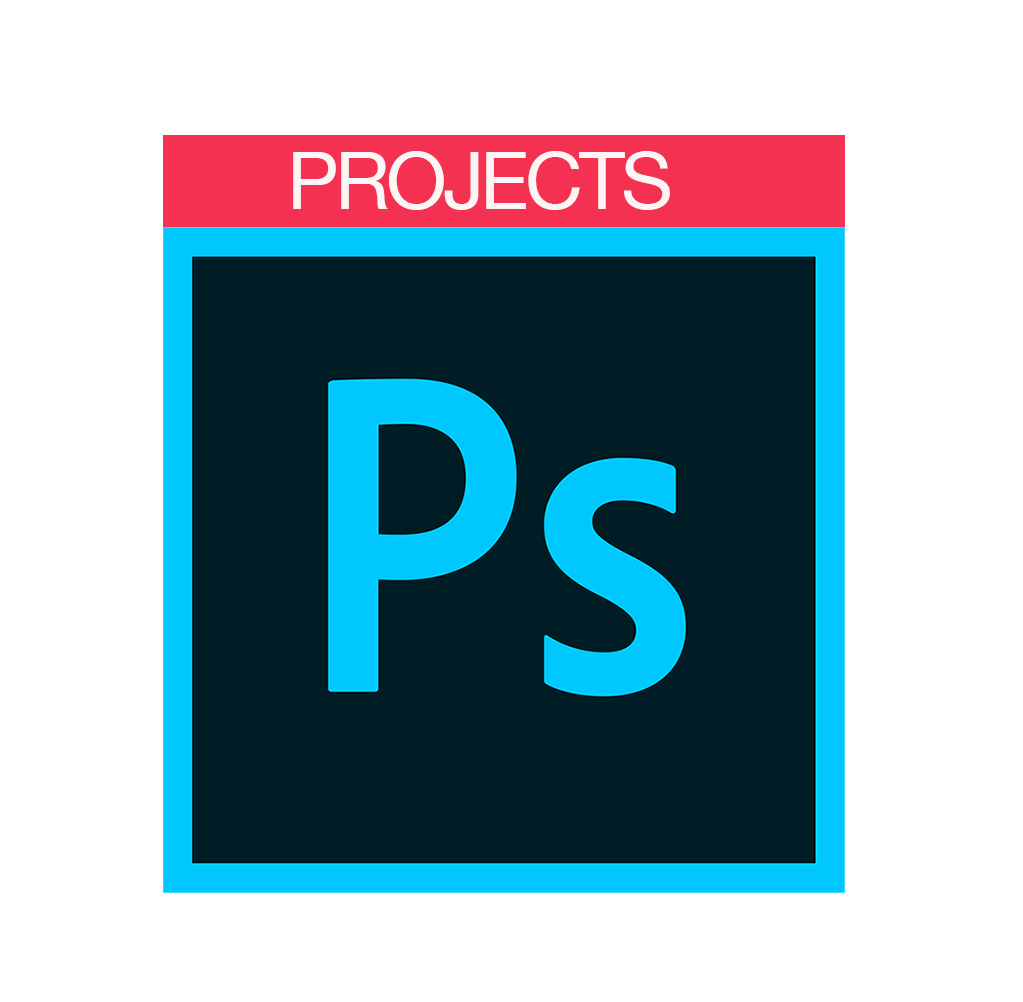
<style>
.page{position:relative;width:1023px;height:1002px;background:#ffffff}
.page>*{position:absolute;margin:0}
.t1{font:80px "HelveticaNeue";letter-spacing:-0.05em;color:#fbf5f6}
</style>
<div class="page">
<p class="t1" style="left:293px;top:151px;width:377px;height:59px">PROJECTS</p>
</div>
